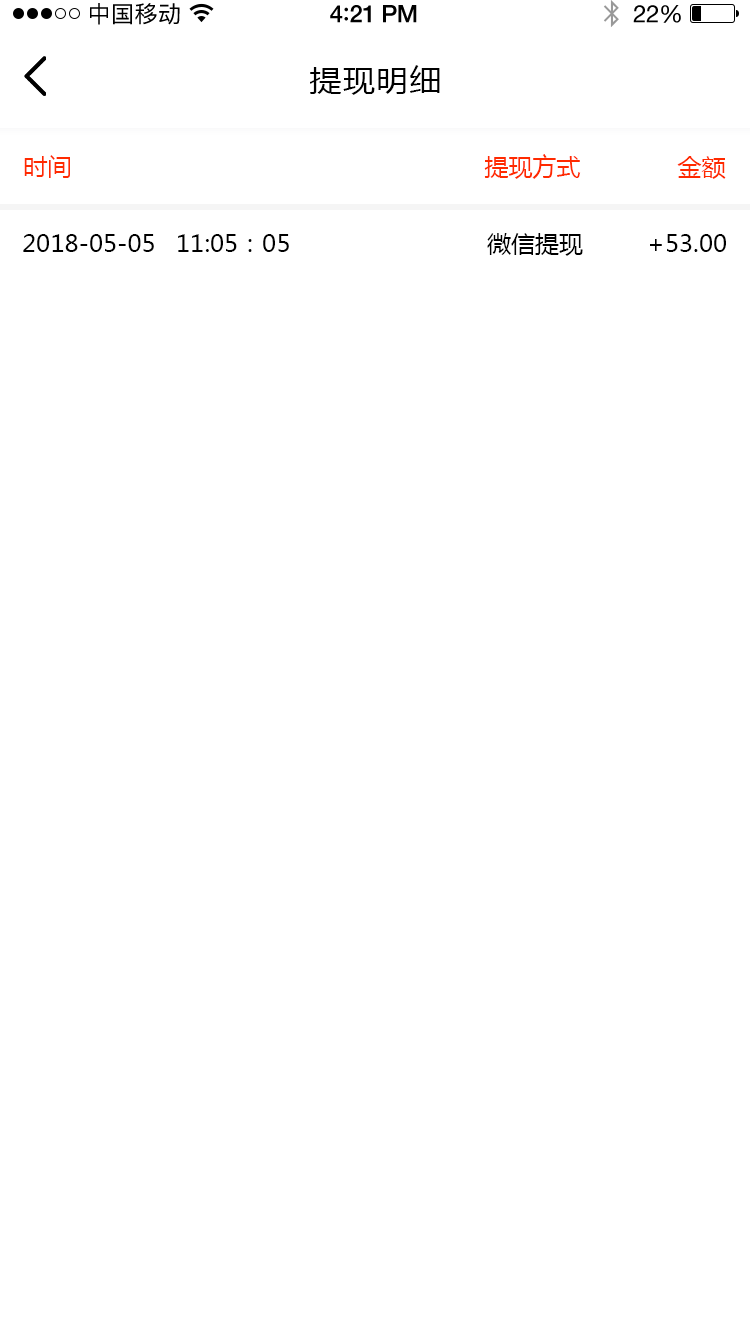
<style>
.page{position:relative;width:750px;height:1334px;background:#ffffff}
.page>*{position:absolute;margin:0}
.t1{font:23px "PingFangSC-Regular";letter-spacing:0.02em;color:#000000}
.t2{font:24px "HelveticaNeue-Medium";letter-spacing:-0.02em;color:#000000}
.t3{font:26px "Avenir-Medium";letter-spacing:-0.02em;color:#000000}
.t4{font:24px "HelveticaNeue";letter-spacing:-0.02em;color:#000000}
.t5{font:30px "MicrosoftYaHei";letter-spacing:0.05em;color:#000000;scale:1.06 1}
.t6{font:24px "MicrosoftYaHei";color:#ff2a00;text-transform:uppercase}
.t7{font:24px "MicrosoftYaHei";color:#000000;text-transform:uppercase}
</style>
<div class="page">
<p class="t1" style="left:90px;top:3px;width:90px;height:22px">中国移动</p>
<p class="t2" style="left:330px;top:5px;width:87px;height:18px">4<span class="t3">:</span>21 PM</p>
<p class="t4" style="left:633px;top:5px;width:48px;height:18px">22%</p>
<p class="t5" style="left:310px;top:65px;width:130px;height:30px">提现明细</p>
<p class="t6" style="left:24px;top:155px;width:46px;height:23px">时间</p>
<p class="t6" style="left:484px;top:154px;width:97px;height:25px">提现方式</p>
<p class="t6" style="left:677px;top:156px;width:49px;height:23px">金额</p>
<p class="t7" style="left:487px;top:233px;width:96px;height:23px">微信提现</p>
<p class="t7" style="left:23px;top:234px;width:131px;height:18px">2018-05-05</p>
<p class="t7" style="left:178px;top:234px;width:111px;height:18px">11:05：05</p>
<p class="t7" style="left:650px;top:234px;width:76px;height:18px">+53.00</p>
</div>
